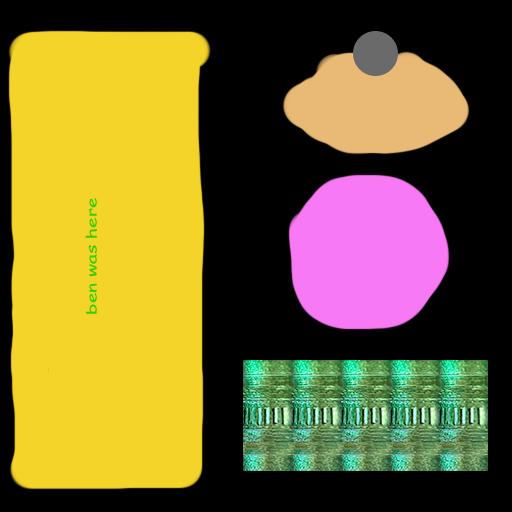
<style>
.page{position:relative;width:512px;height:512px;background:#000000}
.page>*{position:absolute;margin:0}
.t1{font:13.7px "ComicSansMS";color:#35cb00;scale:1.41 1}
</style>
<div class="page">
<p class="t1" style="left:85px;top:198px;width:12px;height:116px;rotate:-90deg">ben was here</p>
</div>
